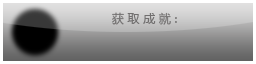
<style>
.page{position:relative;width:256px;height:64px}
.page>*{position:absolute;margin:0}
.t1{font:12px "MicrosoftYaHei";letter-spacing:0.3em;color:#716f6f}
</style>
<div class="page">
<p class="t1" style="left:112px;top:12px;width:65px;height:13px">获取成就:</p>
</div>
